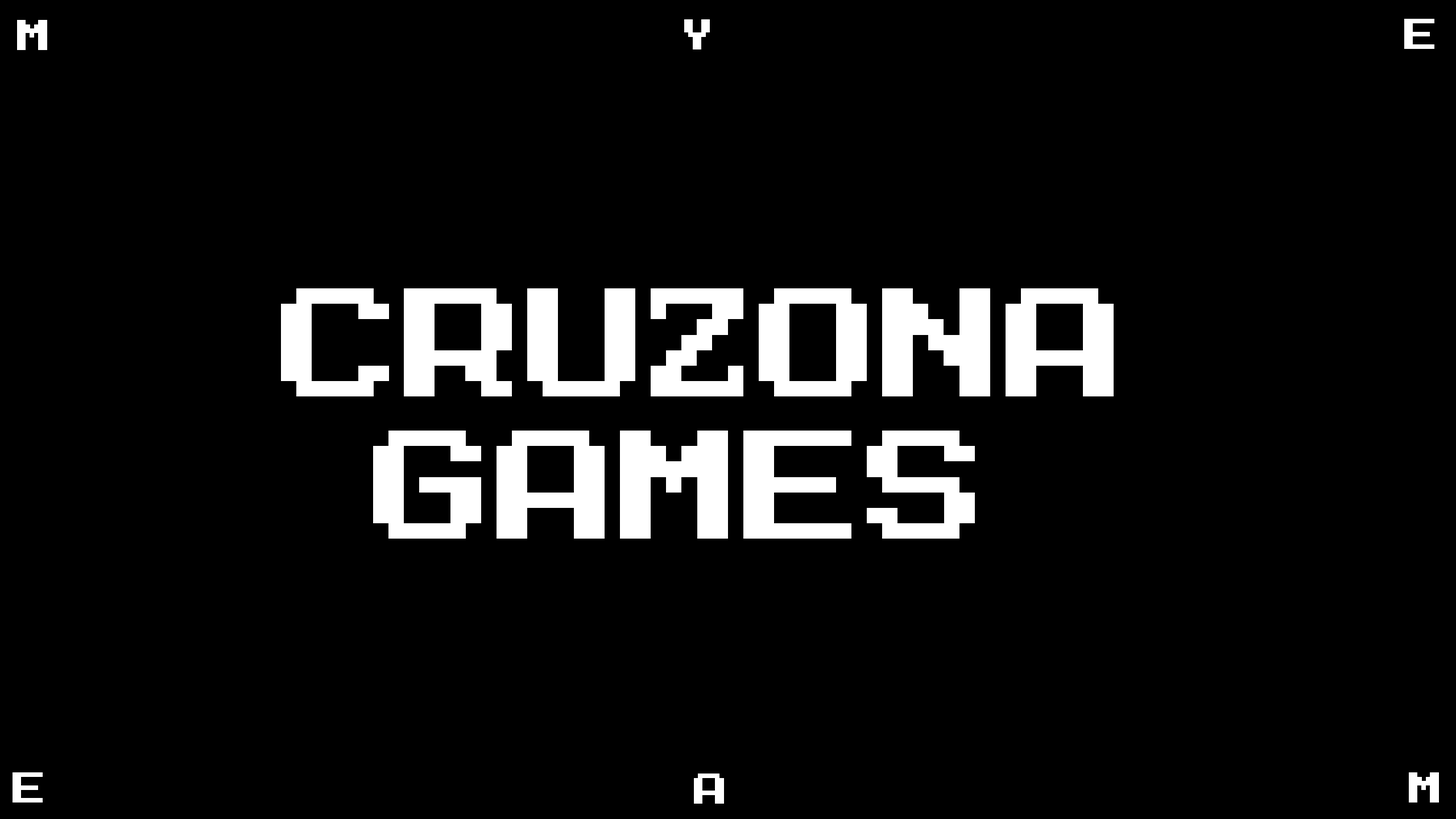
<style>
.page{position:relative;width:1456px;height:819px;background:#000000}
.page>*{position:absolute;margin:0}
.t1{font:34.1px "MegaMan-2";color:#ffffff}
.t2{font:123.4px/14.2px "MegaMan-2";color:#ffffff}
</style>
<div class="page">
<p class="t1" style="left:17px;top:20px;width:30px;height:30px">M</p>
<p class="t1" style="left:684px;top:19px;width:26px;height:30px">y</p>
<p class="t1" style="left:1404px;top:19px;width:30px;height:30px">E</p>
<p class="t2" style="left:281px;top:288px;width:833px;height:251px">CRUZONA <br><br><br><br><br><br><br><br><br><br>  GAMES</p>
<p class="t1" style="left:13px;top:772px;width:30px;height:30px">E</p>
<p class="t1" style="left:694px;top:773px;width:30px;height:31px">A</p>
<p class="t1" style="left:1409px;top:772px;width:30px;height:30px">M</p>
</div>
